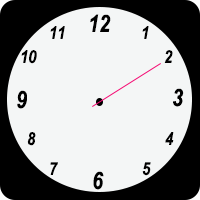
<style>
.page{position:relative;width:200px;height:200px;background:#f4f6f6}
.page>*{position:absolute;margin:0}
.t1{font:24px "ArialNarrow-BoldItalic";color:#000000}
.t2{font:18px "ArialNarrow-BoldItalic";color:#000000}
</style>
<div class="page">
<p class="t1" style="left:90px;top:14px;width:21px;height:18px">12</p>
<p class="t2" style="left:50px;top:26px;width:15px;height:13px">11</p>
<p class="t2" style="left:142px;top:26px;width:7px;height:13px">1</p>
<p class="t2" style="left:21px;top:50px;width:16px;height:14px">10</p>
<p class="t2" style="left:164px;top:50px;width:9px;height:13px">2</p>
<p class="t1" style="left:173px;top:88px;width:11px;height:19px">3</p>
<p class="t1" style="left:17px;top:90px;width:10px;height:19px">9</p>
<p class="t2" style="left:27px;top:132px;width:9px;height:14px">8</p>
<p class="t2" style="left:165px;top:132px;width:9px;height:13px">4</p>
<p class="t2" style="left:50px;top:162px;width:8px;height:13px">7</p>
<p class="t1" style="left:93px;top:171px;width:11px;height:19px">6</p>
<p class="t2" style="left:142px;top:162px;width:9px;height:14px">5</p>
</div>
